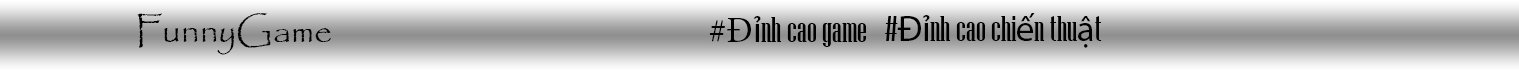
<style>
.page{position:relative;width:1519px;height:70px}
.page>*{position:absolute;margin:0}
.t1{font:36px "Papyrus-Regular";color:#000000}
.t2{font:36px "NiagaraSolid-Reg";color:#000000}
.t3{font:36px "MinionPro-Regular";color:#000000}
.t4{font:36px "MyriadPro-Regular";color:#000000}
</style>
<div class="page">
<p class="t1" style="left:137px;top:13px;width:194px;height:42px">FunnyGame</p>
<p class="t2" style="left:709px;top:16px;width:157px;height:31px"><span class="t3">#Đ</span><span class="t4">ỉ</span>nh cao game</p>
<p class="t2" style="left:885px;top:13px;width:217px;height:35px">#<span class="t4">Đỉ</span>nh cao chi<span class="t4">ế</span>n thu<span class="t4">ậ</span>t</p>
</div>
